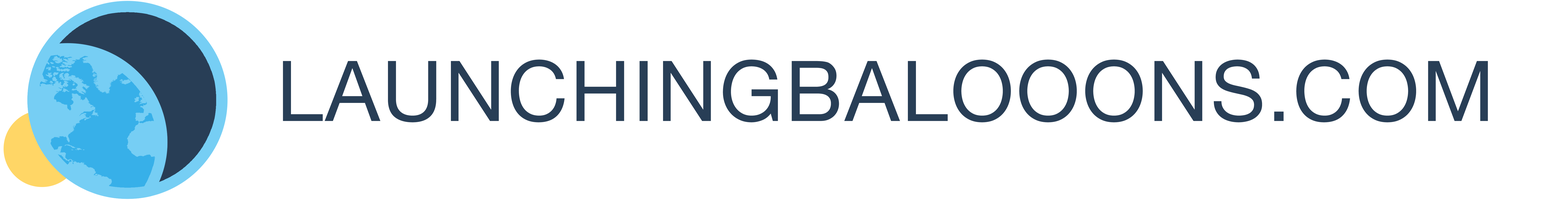
<style>
.page{position:relative;width:1568px;height:200px;background:#ffffff}
.page>*{position:absolute;margin:0}
.t1{font:84px "HelveticaNeue";letter-spacing:0.025em;color:#283e56;text-transform:uppercase}
</style>
<div class="page">
<p class="t1" style="left:283px;top:60px;width:1205px;height:63px">LAUNChingBalooons.com</p>
</div>
